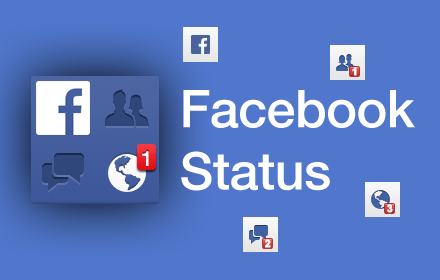
<style>
.page{position:relative;width:440px;height:280px;background:#5077cc}
.page>*{position:absolute;margin:0}
.t1{font:52px "HelveticaNeueLT-Medium";letter-spacing:-0.01em;color:#ffffff}
</style>
<div class="page">
<p class="t1" style="left:181px;top:90px;width:234px;height:101px">Facebook Status</p>
</div>
